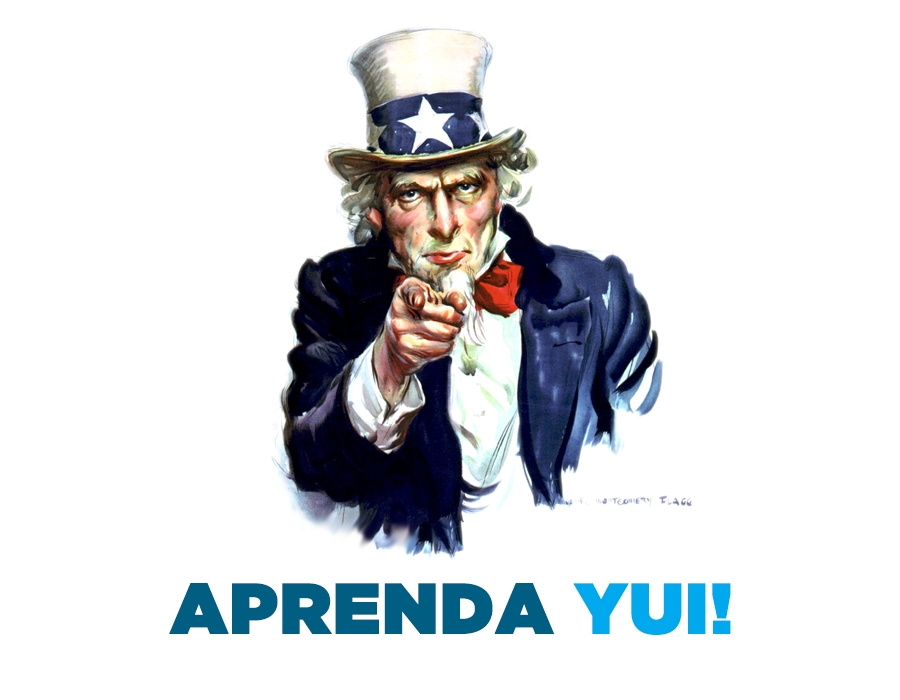
<style>
.page{position:relative;width:900px;height:700px;background:#ffffff}
.page>*{position:absolute;margin:0}
.t1{font:71.4px "GothamUltra";color:#005e83;font-weight:bold}
.t2{font:71.4px "GothamUltra";color:#00a9ee;font-weight:bold}
</style>
<div class="page">
<p class="t1" style="left:169px;top:583px;width:562px;height:52px">APRENDA <span class="t2">YUI!</span></p>
</div>
